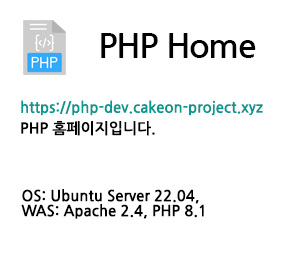
<style>
.page{position:relative;width:300px;height:280px;background:#ffffff}
.page>*{position:absolute;margin:0}
.t1{font:34px "NanumGothicBold";letter-spacing:-0.04em;color:#000000}
.t2{font:15px "NanumGothicBold";color:#0a978f}
.t3{font:15px "NanumGothicBold";color:#000000}
.t4{font:15px/15px "NanumGothicBold";color:#000000}
</style>
<div class="page">
<p class="t1" style="left:101px;top:33px;width:155px;height:25px">PHP Home</p>
<p class="t2" style="left:21px;top:100px;width:242px;height:16px">https://php-dev.cakeon-project.xyz</p>
<p class="t3" style="left:21px;top:121px;width:134px;height:15px">PHP 홈페이지입니다.</p>
<p class="t4" style="left:21px;top:189px;width:183px;height:30px">OS: Ubuntu Server 22.04, <br>WAS: Apache 2.4, PHP 8.1</p>
</div>
